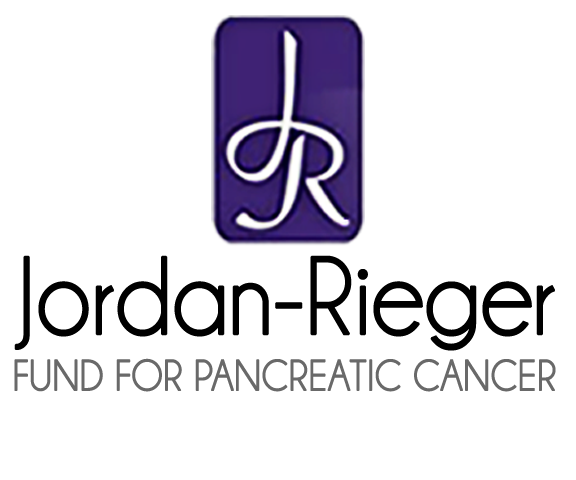
<style>
.page{position:relative;width:576px;height:480px;background:#ffffff}
.page>*{position:absolute;margin:0}
.t1{font:111.5px "Champagne&Limousines";letter-spacing:-0.01em;color:#000000;font-weight:bold;scale:0.91 1}
.t2{font:44px "Champagne&Limousines";color:#696969;font-weight:bold;scale:0.91 1}
</style>
<div class="page">
<p class="t1" style="left:14px;top:255px;width:541px;height:96px">Jordan-Rieger</p>
<p class="t2" style="left:14px;top:358px;width:542px;height:34px">FUND FOR PANCREATIC CANCER</p>
</div>
